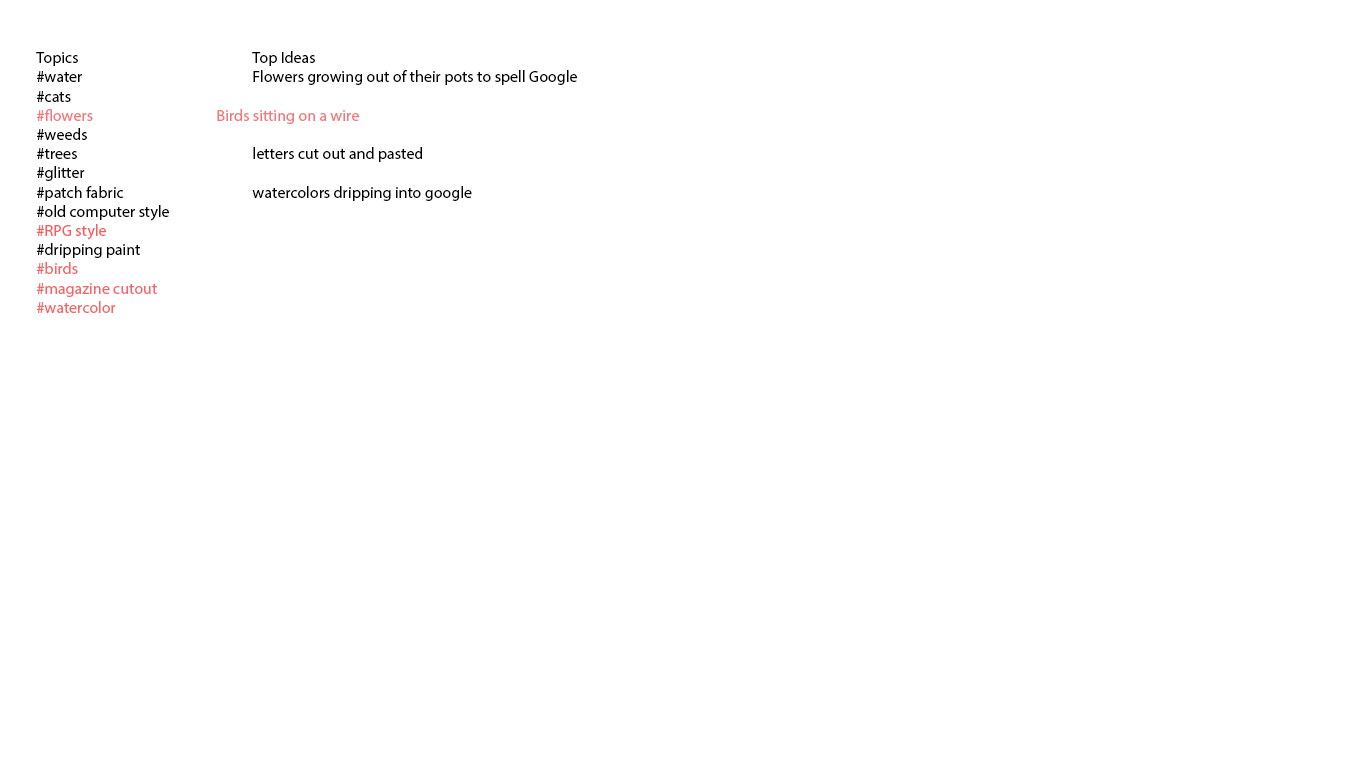
<style>
.page{position:relative;width:1366px;height:768px;background:#ffffff}
.page>*{position:absolute;margin:0}
.t1{font:16px "MyriadPro-Regular";color:#000000}
.t2{font:16px "MyriadPro-Regular";color:#f47676}
.t3{font:16px "MyriadPro-Regular";color:#f65c5c}
.t4{font:16px "MyriadPro-Regular";color:#f26667}
</style>
<div class="page">
<p class="t1" style="left:36px;top:51px;width:541px;height:262px">Topics     Top Ideas<br>#water     Flowers growing out of their pots to spell Google<br>#cats     <br><span class="t2">#flowers    Birds sitting on a wire <br></span>#weeds<br>#trees     letters cut out and pasted <br>#glitter<br>#patch fabric    watercolors dripping into google<br>#old computer style  <br><span class="t3">#RPG style<br></span>#dripping paint<br><span class="t4">#birds<br>#magazine cutout<br>#watercolor</span></p>
</div>
